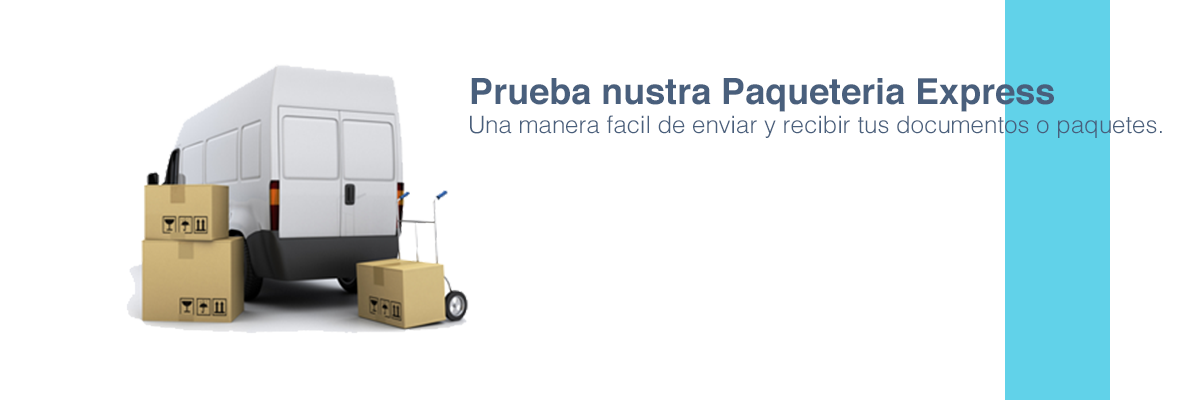
<style>
.page{position:relative;width:1200px;height:400px;background:#ffffff}
.page>*{position:absolute;margin:0}
.t1{font:36px "Helvetica-Bold";color:#495f7c}
.t2{font:24px "Helvetica-Light";color:#495f7c}
</style>
<div class="page">
<p class="t1" style="left:471px;top:78px;width:583px;height:34px">Prueba nustra Paqueteria Express</p>
<p class="t2" style="left:470px;top:115px;width:692px;height:23px">Una manera facil de enviar y recibir tus documentos o paquetes.</p>
</div>
